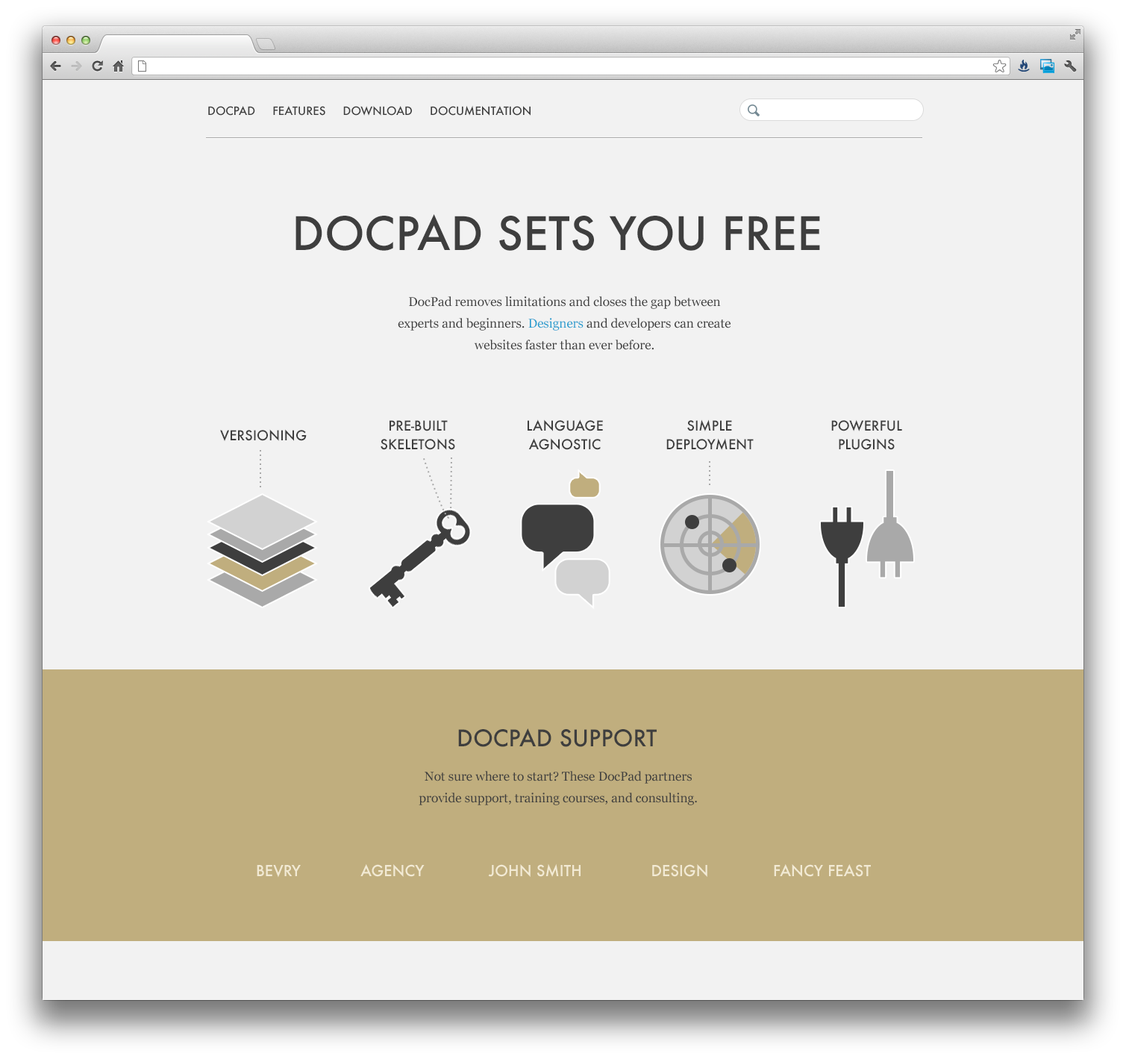
<style>
.page{position:relative;width:1126px;height:1059px;background:#f2f2f2}
.page>*{position:absolute;margin:0}
.t1{font:11.2px "Futura-Medium";color:#3e3e3e;text-transform:uppercase}
.t2{font:44.8px "Futura-Medium";color:#3e3e3e;text-transform:uppercase}
.t3{font:12.7px/21.6px "Georgia";color:#3e3e3e}
.t4{font:12.7px/21.6px "Georgia";color:#259dcf}
.t5{font:13.4px/18.7px "Futura-Medium";color:#3e3e3e;text-transform:uppercase}
.t6{font:13.4px "Futura-Medium";color:#3e3e3e;text-transform:uppercase}
.t7{font:22.4px "Futura-Medium";color:#3e3e3e;text-transform:uppercase}
.t8{font:14.9px "Futura-Medium";color:#f2ead4;text-transform:uppercase}
</style>
<div class="page">
<p class="t1" style="left:208px;top:105px;width:323px;height:11px">Docpad     FEATURES     download     documentation</p>
<p class="t2" style="left:296px;top:214px;width:524px;height:37px">Docpad sets you free</p>
<p class="t3" style="left:398px;top:296px;width:333px;height:54px;text-align:center">DocPad removes limitations and closes the gap between experts and beginners. <span class="t4">Designers</span> and developers can create websites faster than ever before.</p>
<p class="t5" style="left:381px;top:420px;width:74px;height:30px;text-align:center">PRE-BUILT<br>SKELETONS</p>
<p class="t5" style="left:528px;top:419px;width:75px;height:31px;text-align:center">language<br>agnostic</p>
<p class="t5" style="left:666px;top:419px;width:88px;height:31px;text-align:center">simple<br>deployment</p>
<p class="t5" style="left:831px;top:419px;width:71px;height:31px;text-align:center">powerful<br>plugins</p>
<p class="t6" style="left:220px;top:429px;width:87px;height:12px">versioning</p>
<p class="t7" style="left:458px;top:728px;width:199px;height:19px">docpad support</p>
<p class="t3" style="left:419px;top:771px;width:278px;height:34px;text-align:center">Not sure where to start? These DocPad partners provide support, training courses, and consulting.</p>
<p class="t8" style="left:257px;top:863px;width:614px;height:15px">bevry             AGENCY              JOHN SMITH               DESIGN              FANCY FEAST</p>
</div>
